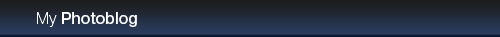
<style>
.page{position:relative;width:500px;height:37px}
.page>*{position:absolute;margin:0}
.t1{font:16px "HelveticaNeue-Medium";color:#ffffff}
.t2{font:16px "HelveticaNeue-Thin";color:#ffffff}
</style>
<div class="page">
<p class="t1" style="left:37px;top:12px;width:100px;height:15px"><span class="t2">My </span>Photoblog</p>
</div>
